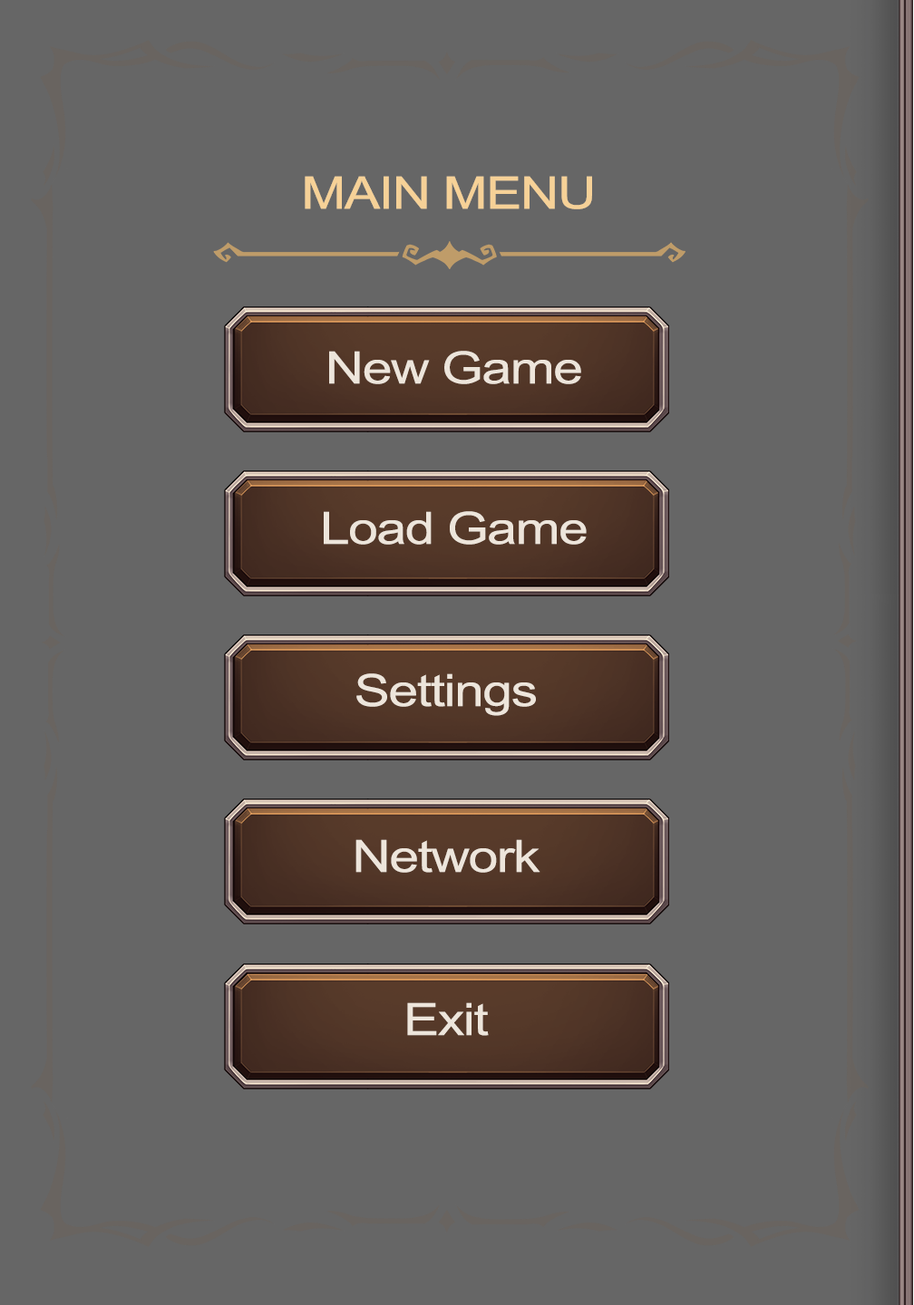
<style>
.page{position:relative;width:914px;height:1305px;background:#666666}
.page>*{position:absolute;margin:0}
.t1{font:44.5px "ArialMT";letter-spacing:-0.025em;color:#f6d197;scale:1.2 1}
.t2{font:44.5px "ArialMT";letter-spacing:-0.025em;color:#ede5db;scale:1.2 1}
</style>
<div class="page">
<p class="t1" style="left:305px;top:176px;width:287px;height:33px">MAIN MENU</p>
<p class="t2" style="left:329px;top:351px;width:252px;height:33px">New Game</p>
<p class="t2" style="left:324px;top:511px;width:262px;height:34px">Load Game</p>
<p class="t2" style="left:356px;top:673px;width:180px;height:43px">Settings</p>
<p class="t2" style="left:355px;top:839px;width:185px;height:34px">Network</p>
<p class="t2" style="left:407px;top:1002px;width:82px;height:34px">Exit</p>
</div>
